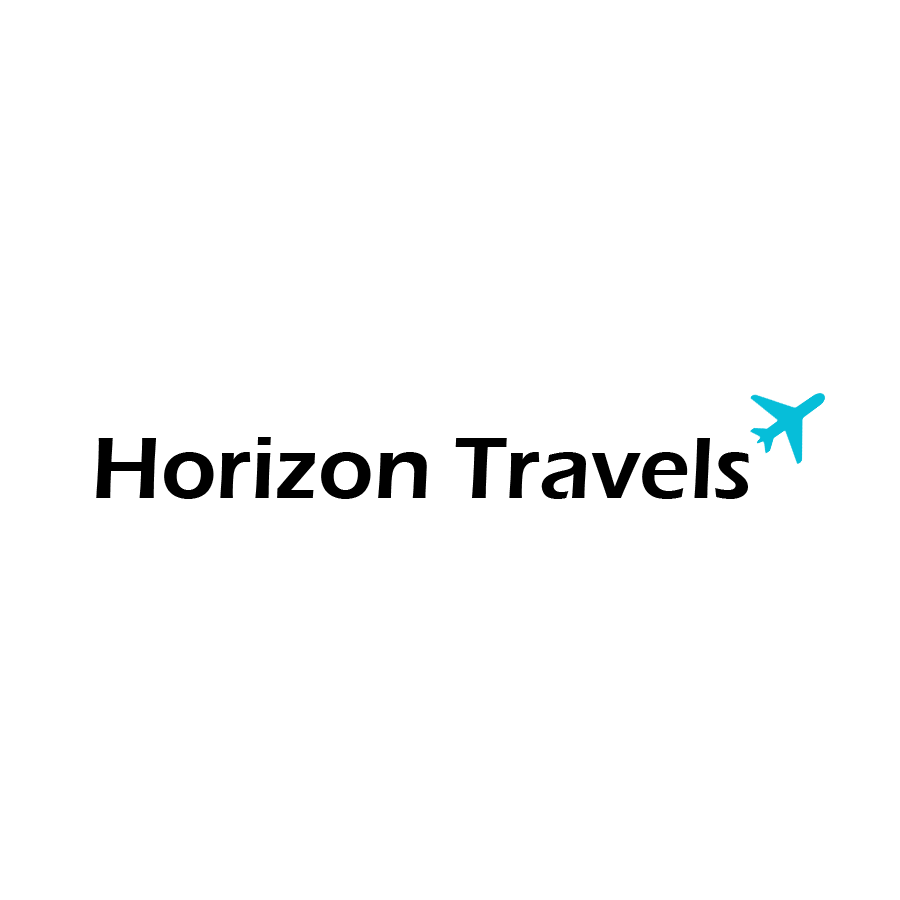
<style>
.page{position:relative;width:900px;height:900px;background:#ffffff}
.page>*{position:absolute;margin:0}
.t1{font:89.7px "ErasITC-Demi";color:#000000}
</style>
<div class="page">
<p class="t1" style="left:96px;top:437px;width:653px;height:62px">Horizon Travels</p>
</div>
